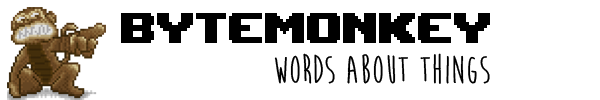
<style>
.page{position:relative;width:600px;height:100px;background:#ffffff}
.page>*{position:absolute;margin:0}
.t1{font:60px "UpheavalTT-BRK-";color:#000000}
.t2{font:40px "MoonFlowerBold";color:#000000}
</style>
<div class="page">
<p class="t1" style="left:121px;top:13px;width:369px;height:30px">bytemonkey</p>
<p class="t2" style="left:274px;top:53px;width:216px;height:31px">words about things</p>
</div>
